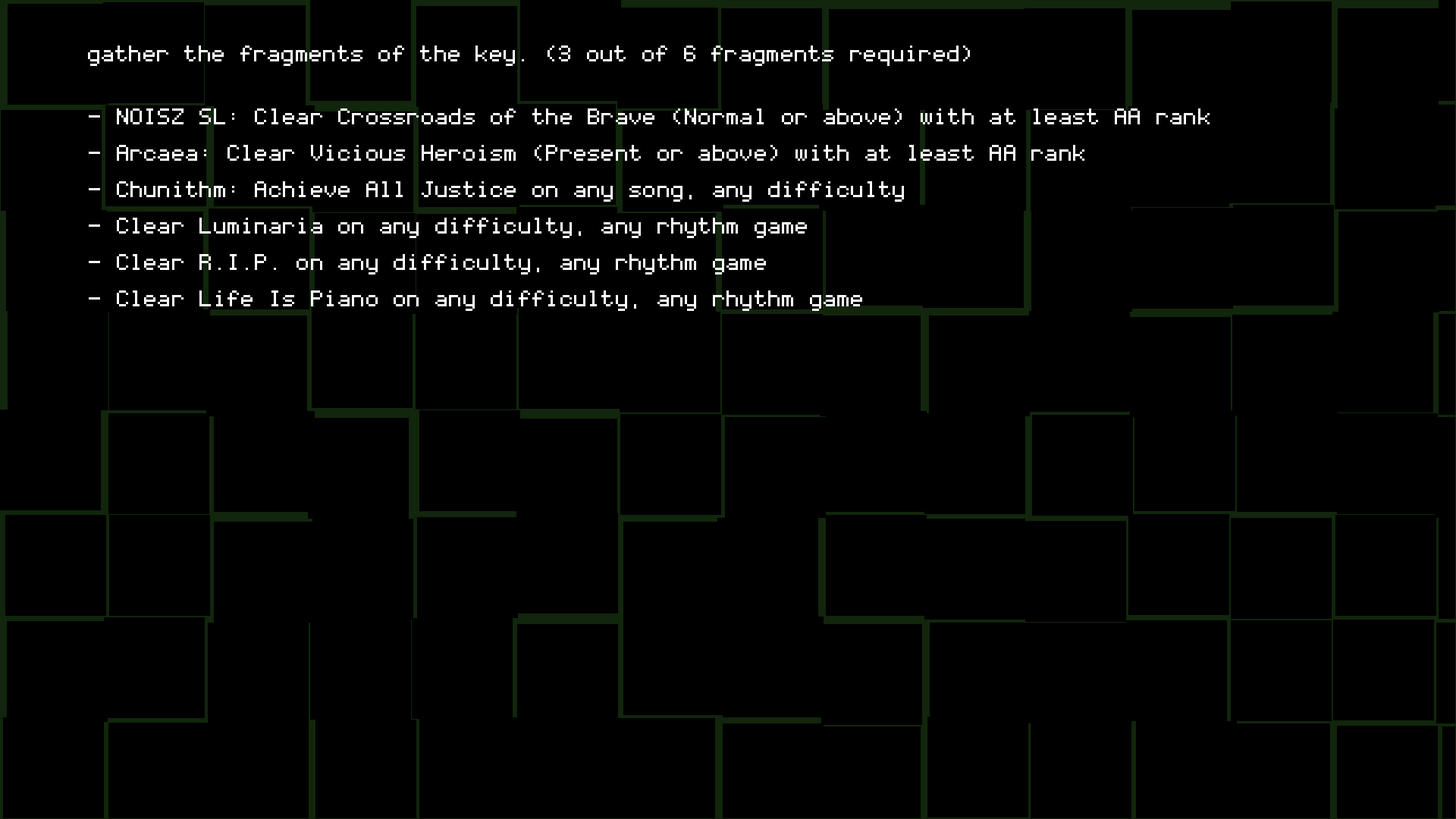
<style>
.page{position:relative;width:1456px;height:819px;background:#000000}
.page>*{position:absolute;margin:0}
.t1{font:36.4px "Coder's-Crux";color:#ffffff}
.t2{font:36.4px/36.4px "Coder's-Crux";color:#ffffff}
</style>
<div class="page">
<p class="t1" style="left:88px;top:45px;width:882px;height:21px">gather the fragments of the key. (3 out of 6 fragments required)</p>
<p class="t2" style="left:89px;top:108px;width:1121px;height:203px">- NOISZ SL: Clear Crossroads of the Brave (Normal or above) with at least AA rank<br>- Arcaea: Clear Vicious Heroism (Present or above) with at least AA rank<br>- Chunithm: Achieve All Justice on any song, any difficulty<br>- Clear Luminaria on any difficulty, any rhythm game<br>- Clear R.I.P. on any difficulty, any rhythm game<br>- Clear Life Is Piano on any difficulty, any rhythm game</p>
</div>
